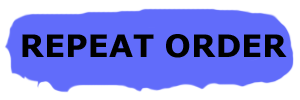
<style>
.page{position:relative;width:300px;height:100px;background:#616cfa}
.page>*{position:absolute;margin:0}
.t1{font:31px "Verdana-Bold";color:#000000}
</style>
<div class="page">
<p class="t1" style="left:22px;top:34px;width:265px;height:24px">REPEAT ORDER</p>
</div>
